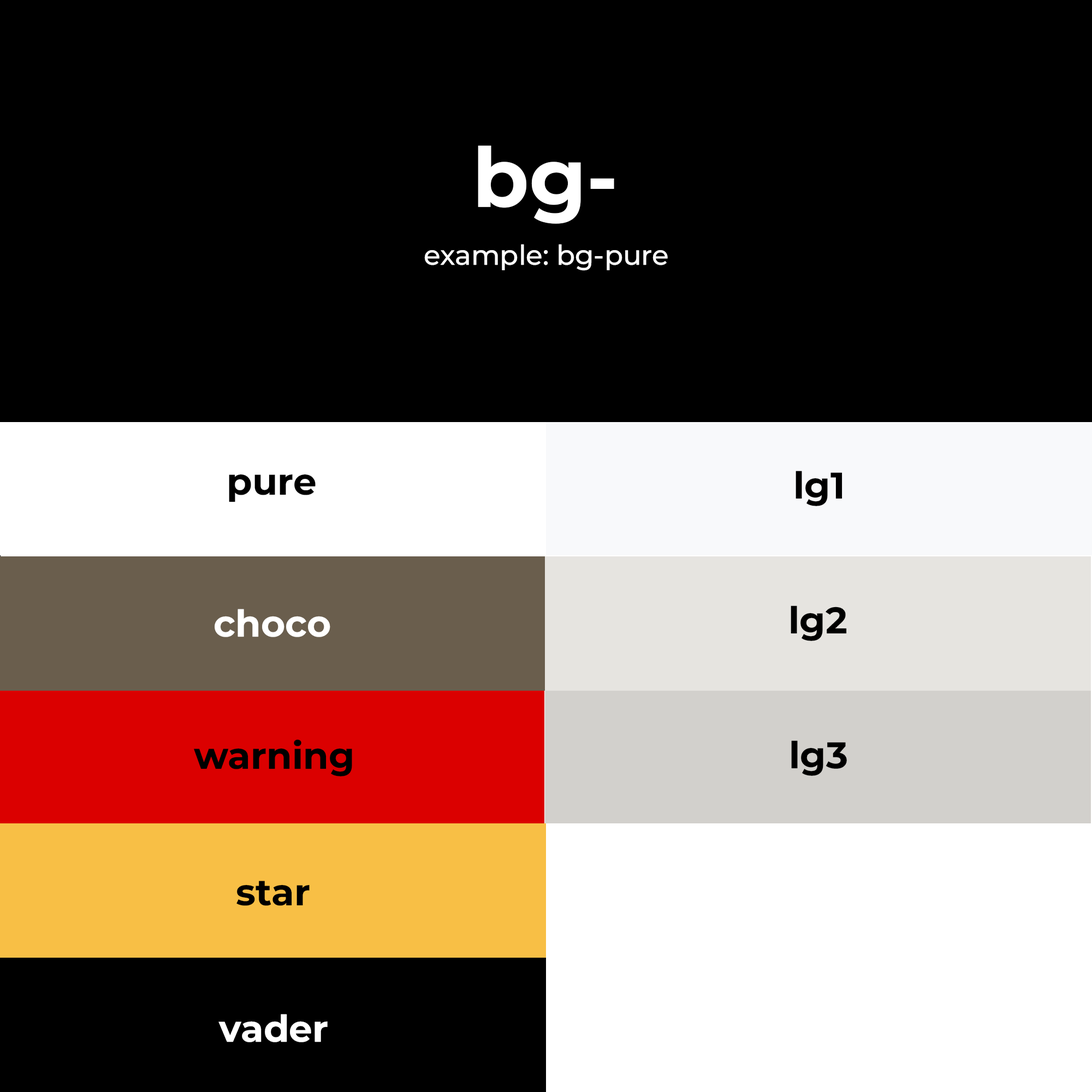
<style>
.page{position:relative;width:1092px;height:1092px;background:#000000}
.page>*{position:absolute;margin:0}
.t1{font:82.6px "MontserratRoman-Bold";color:#ffffff}
.t2{font:27.4px "MontserratRoman-Medium";color:#ffffff}
.t3{font:36.9px "MontserratRoman-Bold";color:#000000}
.t4{font:36.9px "MontserratRoman-Bold";color:#ffffff}
</style>
<div class="page">
<p class="t1" style="left:478px;top:145px;width:136px;height:79px">bg-</p>
<p class="t2" style="left:424px;top:244px;width:244px;height:27px">example: bg-pure</p>
<p class="t3" style="left:229px;top:474px;width:87px;height:28px">pure</p>
<p class="t3" style="left:796px;top:471px;width:46px;height:35px">lg1</p>
<p class="t3" style="left:791px;top:606px;width:56px;height:35px">lg2</p>
<p class="t4" style="left:215px;top:609px;width:115px;height:28px">choco</p>
<p class="t3" style="left:194px;top:739px;width:158px;height:37px">warning</p>
<p class="t3" style="left:791px;top:740px;width:56px;height:36px">lg3</p>
<p class="t3" style="left:236px;top:881px;width:74px;height:25px">star</p>
<p class="t4" style="left:218px;top:1014px;width:110px;height:28px">vader</p>
</div>
